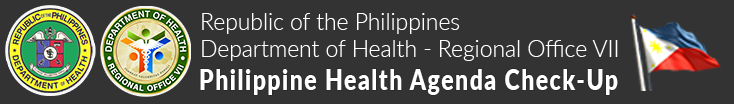
<style>
.page{position:relative;width:734px;height:104px;background:#333333}
.page>*{position:absolute;margin:0}
.t1{font:22.9px "Lato-Light";color:#ffffff}
.t2{font:29.4px "Lato-Black";letter-spacing:0.07em;color:#ffffff;scale:0.78 1}
</style>
<div class="page">
<p class="t1" style="left:202px;top:13px;width:416px;height:48px">Republic of the Philippines<br>Department of Health - Regional Office VII</p>
<p class="t2" style="left:200px;top:69px;width:418px;height:26px">Philippine Health Agenda Check-Up</p>
</div>
